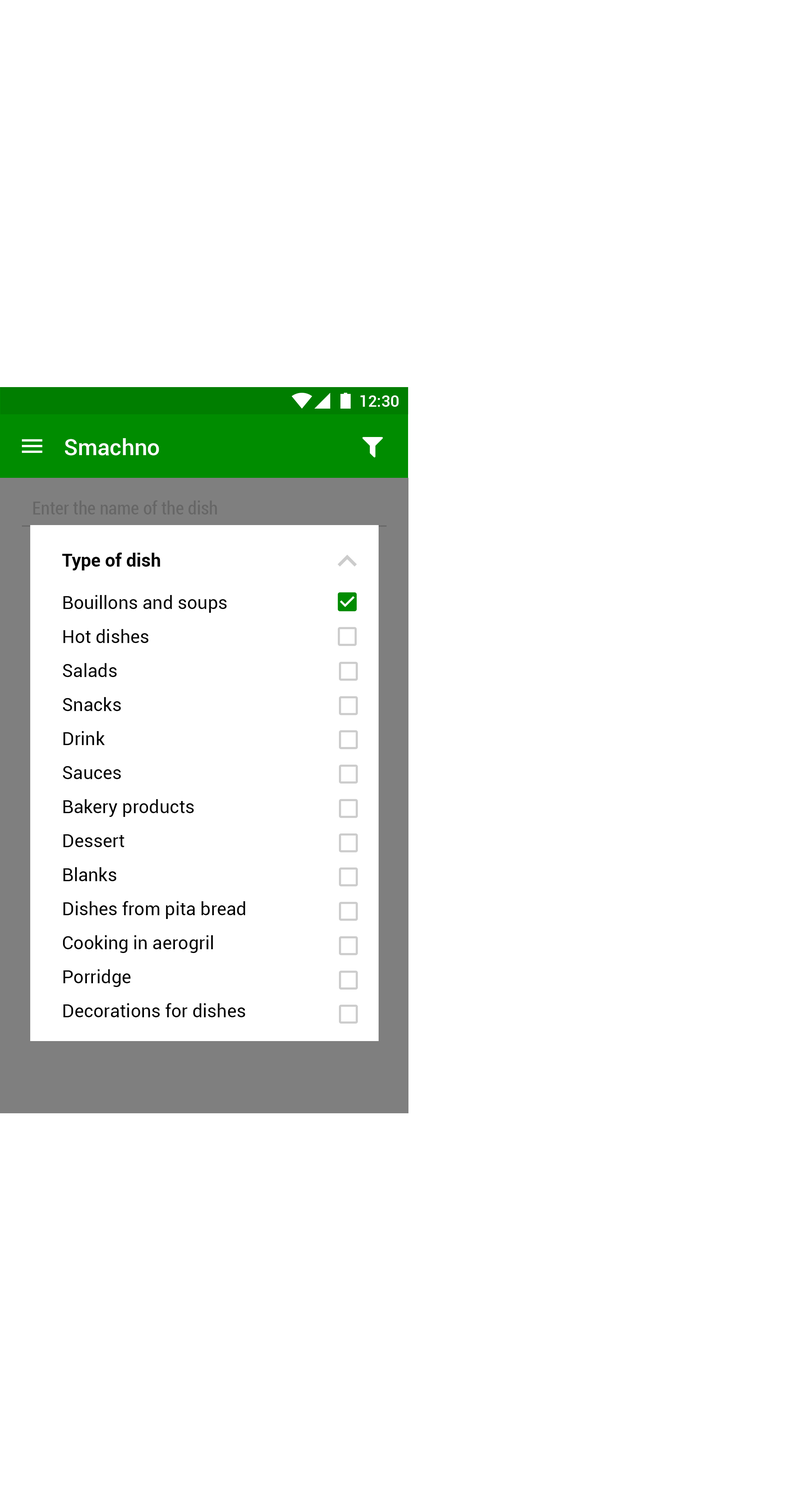
<style>
.page{position:relative;width:795px;height:1500px;background:#ffffff}
.page>*{position:absolute;margin:0}
.t1{font:15.9px "Roboto-Medium";color:#ffffff}
.t2{font:22.7px "Roboto-Medium";color:#ffffff}
.t3{font:18.1px "Roboto-Condensed";color:#666666}
.t4{font:18.1px "Roboto-Bold";color:#000000}
.t5{font:18.1px/34px "Roboto-Regular";color:#000000}
</style>
<div class="page">
<p class="t1" style="left:361px;top:395px;width:38px;height:12px">12:30</p>
<p class="t2" style="left:65px;top:438px;width:94px;height:17px">Smachno</p>
<p class="t3" style="left:33px;top:500px;width:184px;height:14px">Enter the name of the dish</p>
<p class="t4" style="left:62px;top:552px;width:98px;height:18px">Type of dish</p>
<p class="t5" style="left:63px;top:595px;width:182px;height:422px">Bouillons and soups<br>Hot dishes<br>Salads<br>Snacks<br>Drink<br>Sauces<br>Bakery products<br>Dessert<br>Blanks<br>Dishes from pita bread<br>Cooking in aerogril<br>Porridge<br>Decorations for dishes</p>
</div>
